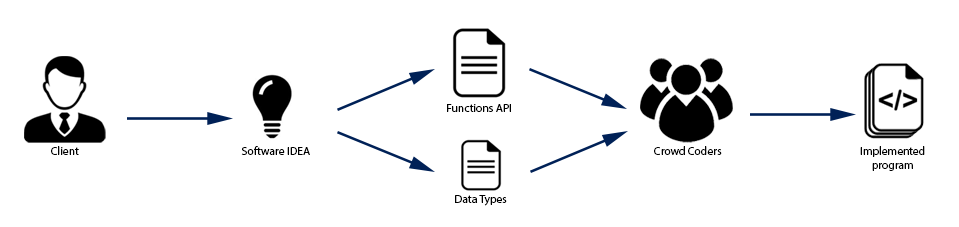
<style>
.page{position:relative;width:959px;height:227px;background:#ffffff}
.page>*{position:absolute;margin:0}
.t1{font:11.5px "MyriadPro-Regular";color:#000000}
.t2{font:11.5px "MyriadPro-Regular";color:#030303}
</style>
<div class="page">
<p class="t1" style="left:447px;top:104px;width:64px;height:8px">Functions API</p>
<p class="t2" style="left:51px;top:146px;width:28px;height:9px">Client</p>
<p class="t1" style="left:241px;top:146px;width:69px;height:9px">Software IDEA</p>
<p class="t2" style="left:654px;top:146px;width:68px;height:9px">Crowd Coders</p>
<p class="t2" style="left:860px;top:146px;width:65px;height:25px;text-align:center">Implemented<br>program</p>
<p class="t1" style="left:455px;top:195px;width:52px;height:11px">Data Types</p>
</div>
